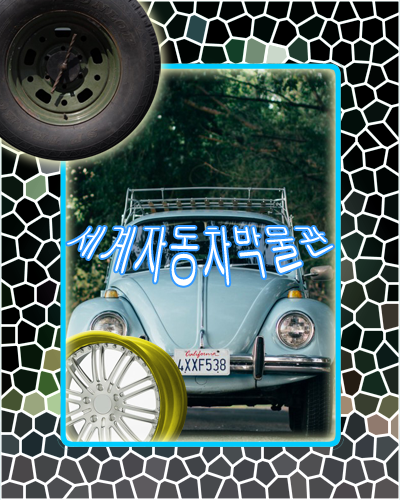
<style>
.page{position:relative;width:400px;height:500px}
.page>*{position:absolute;margin:0}
.t1{font:30px "Gulim";color:#ffffff}
</style>
<div class="page">
<p class="t1" style="left:67px;top:227px;width:266px;height:59px;text-align:center">세계자동차박물관</p>
</div>
